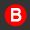
<style>
.page{position:relative;width:30px;height:30px;background:#333333}
.page>*{position:absolute;margin:0}
.t1{font:18.1px "DokChampa";color:#ffffff;font-weight:bold}
</style>
<div class="page">
<p class="t1" style="left:11px;top:8px;width:11px;height:14px">B</p>
</div>
